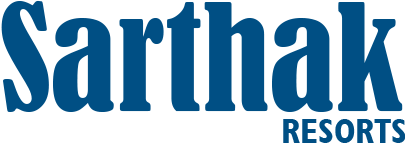
<style>
.page{position:relative;width:405px;height:143px;background:#ffffff}
.page>*{position:absolute;margin:0}
.t1{font:137.6px "BernardMT-Condensed";color:#004f84}
.t2{font:34.8px "GillSansMT-BoldCondensed";color:#004f84;text-transform:uppercase}
</style>
<div class="page">
<p class="t1" style="left:1px;top:0px;width:402px;height:112px">Sarthak</p>
<p class="t2" style="left:283px;top:119px;width:123px;height:24px">resorts</p>
</div>
